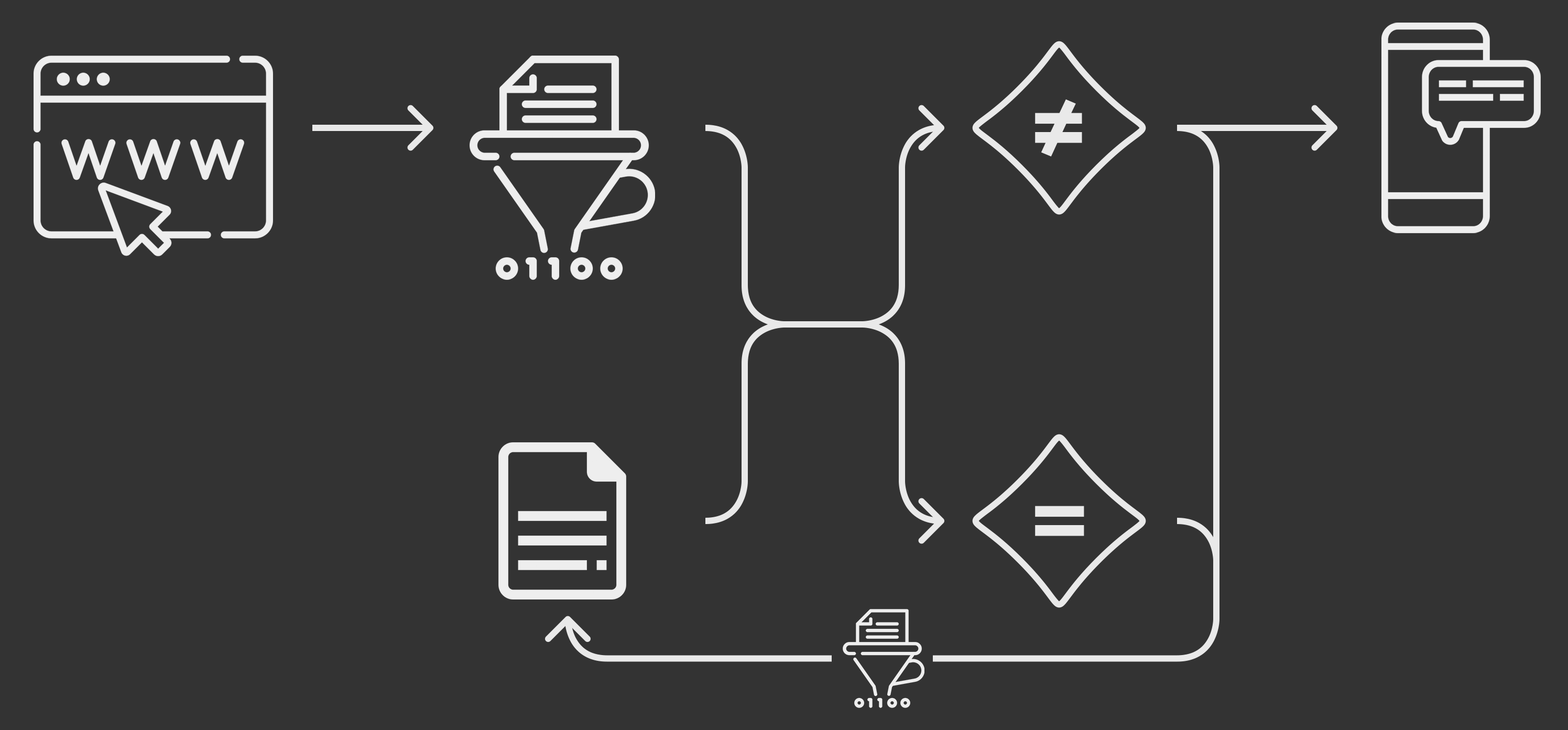
<style>
.page{position:relative;width:1568px;height:730px;background:#333333}
.page>*{position:absolute;margin:0}
.t1{font:100.4px "OpenSans-BoldItalic";letter-spacing:0.025em;color:#e9e9e9}
</style>
<div class="page">
<p class="t1" style="left:1035px;top:99px;width:47px;height:58px">≠</p>
<p class="t1" style="left:1035px;top:506px;width:49px;height:30px">=</p>
</div>
